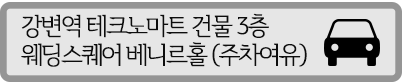
<style>
.page{position:relative;width:402px;height:83px;background:#e6e6e6}
.page>*{position:absolute;margin:0}
.t1{font:24px "Daehan";letter-spacing:-0.075em;color:#0d0d0d}
</style>
<div class="page">
<p class="t1" style="left:21px;top:13px;width:286px;height:54px">강변역 테크노마트 건물 3층<br>웨딩스퀘어 베니르홀 (주차여유)</p>
</div>
